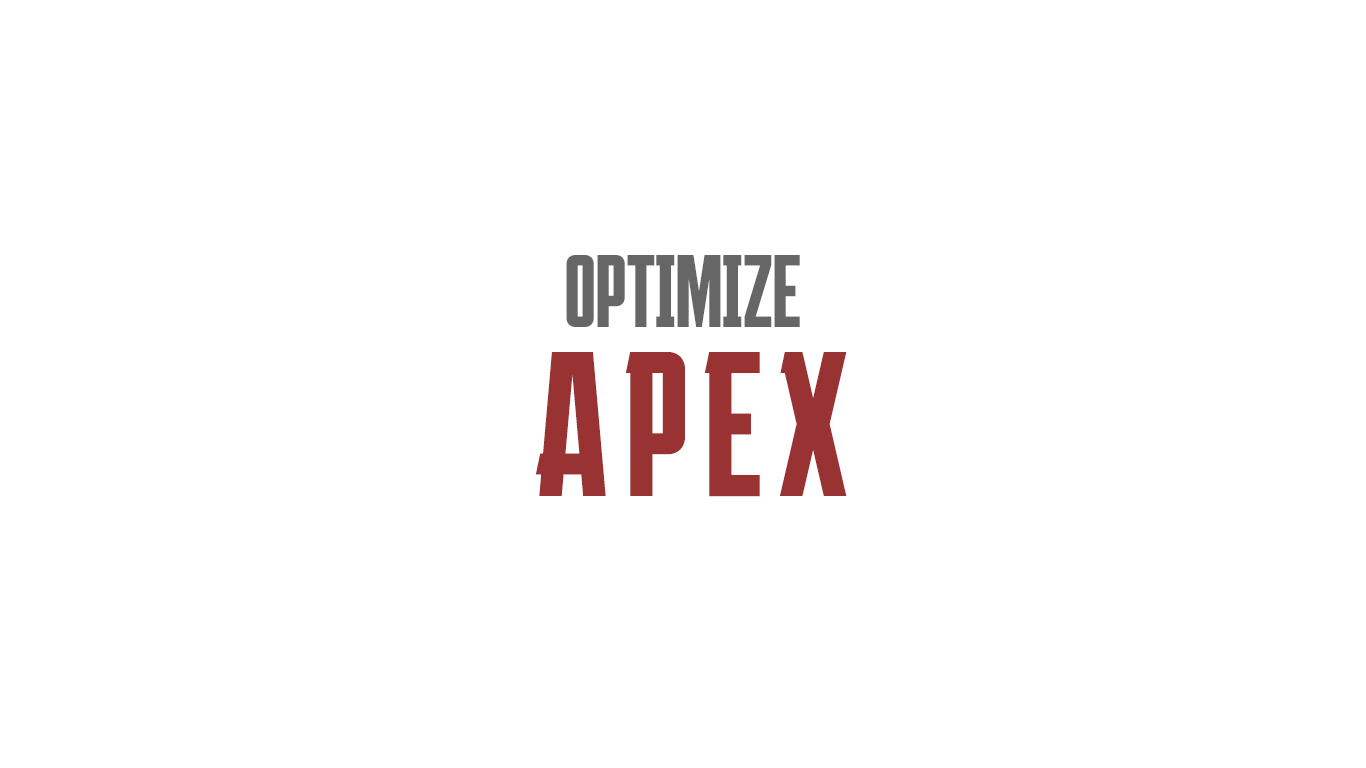
<style>
.page{position:relative;width:1366px;height:768px;background:#ffffff}
.page>*{position:absolute;margin:0}
.t1{font:72px "Apex-Regular";color:#666666}
.t2{font:144px "Apex-Regular";letter-spacing:0.1em;color:#993333}
</style>
<div class="page">
<p class="t1" style="left:566px;top:255px;width:234px;height:72px">optimize</p>
<p class="t2" style="left:535px;top:352px;width:312px;height:145px">APEX</p>
</div>
